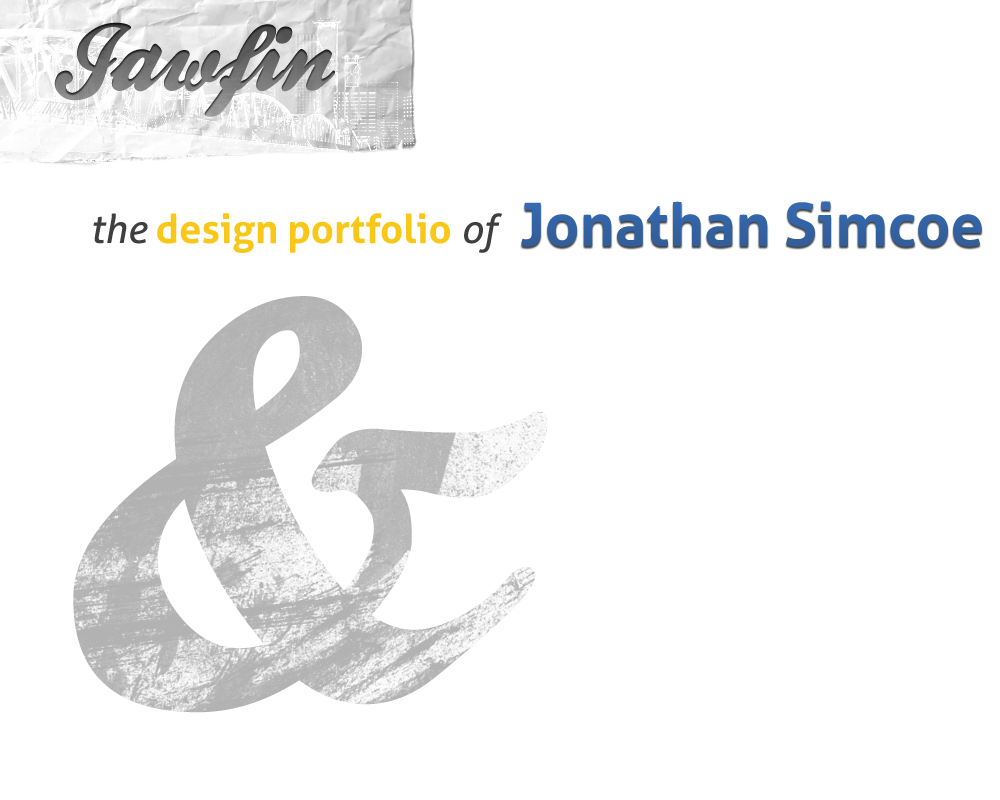
<style>
.page{position:relative;width:1000px;height:800px;background:#ffffff}
.page>*{position:absolute;margin:0}
.t1{font:100px "BallparkWeiner"}
.t2{font:60px "Aller-Bold";color:#3362a1}
.t3{font:40px "Aller-Bold";color:#f9c718}
.t4{font:40px "Aller-Italic";color:#3f3f3f}
.t5{font:600px "BallparkWeiner";color:#bbbbbb}
</style>
<div class="page">
<p class="t1" style="left:54px;top:22px;width:281px;height:95px">Jawfin</p>
<p class="t2" style="left:521px;top:201px;width:461px;height:46px">Jonathan Simcoe</p>
<p class="t3" style="left:93px;top:213px;width:409px;height:40px"><span class="t4">the </span>design portfolio <span class="t4">of</span></p>
<p class="t5" style="left:73px;top:296px;width:475px;height:417px">&amp;</p>
</div>
